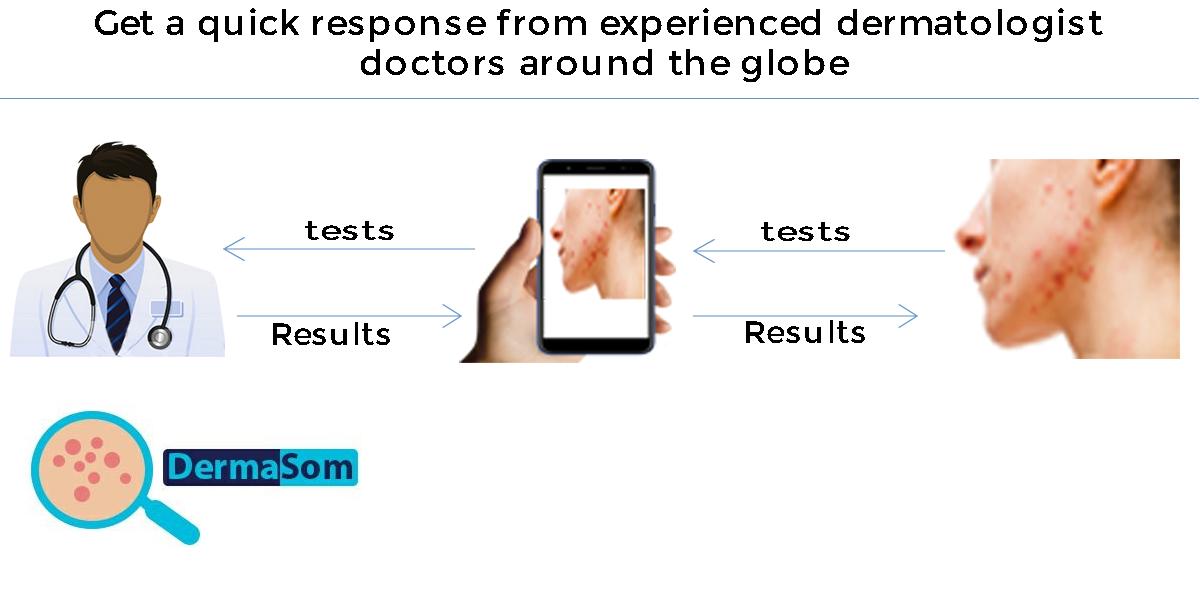
<style>
.page{position:relative;width:1200px;height:600px;background:#ffffff}
.page>*{position:absolute;margin:0}
.t1{font:35.4px/40.1px "Montserrat-Regular";letter-spacing:0.02em;color:#000101}
.t2{font:27.3px "Montserrat-Regular";letter-spacing:0.02em;color:#000000;scale:1.33 1}
.t3{font:30.9px "Montserrat-Regular";letter-spacing:0.02em;color:#000000}
.t4{font:30.9px "Montserrat-Regular";letter-spacing:0.02em;color:#000000;scale:1.05 1}
</style>
<div class="page">
<p class="t1" style="left:95px;top:8px;width:1008px;height:74px;text-align:center">Get a quick response from experienced dermatologist <br>doctors around the globe</p>
<p class="t2" style="left:305px;top:221px;width:89px;height:19px">tests</p>
<p class="t2" style="left:761px;top:222px;width:89px;height:19px">tests</p>
<p class="t3" style="left:273px;top:322px;width:117px;height:23px">Results</p>
<p class="t4" style="left:746px;top:320px;width:119px;height:23px">Results</p>
</div>
